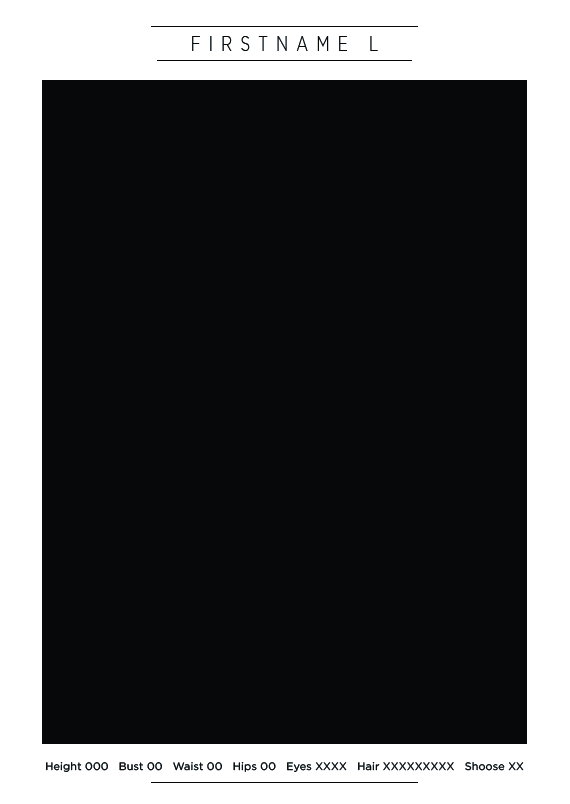
<style>
.page{position:relative;width:570px;height:804px;background:#060809}
.page>*{position:absolute;margin:0}
.t1{font:21.5px "GothamPro-Light";letter-spacing:0.56em;color:#000000;scale:0.7 1}
.t2{font:10.7px "GothamPro";letter-spacing:0.02em;color:#000000}
</style>
<div class="page">
<p class="t1" style="left:192px;top:36px;width:186px;height:15px">FIRSTNAME L</p>
<p class="t2" style="left:46px;top:762px;width:478px;height:10px">Height 000   Bust 00   Waist 00   Hips 00   Eyes XXXX   Hair XXXXXXXXX   Shoose XX</p>
</div>
